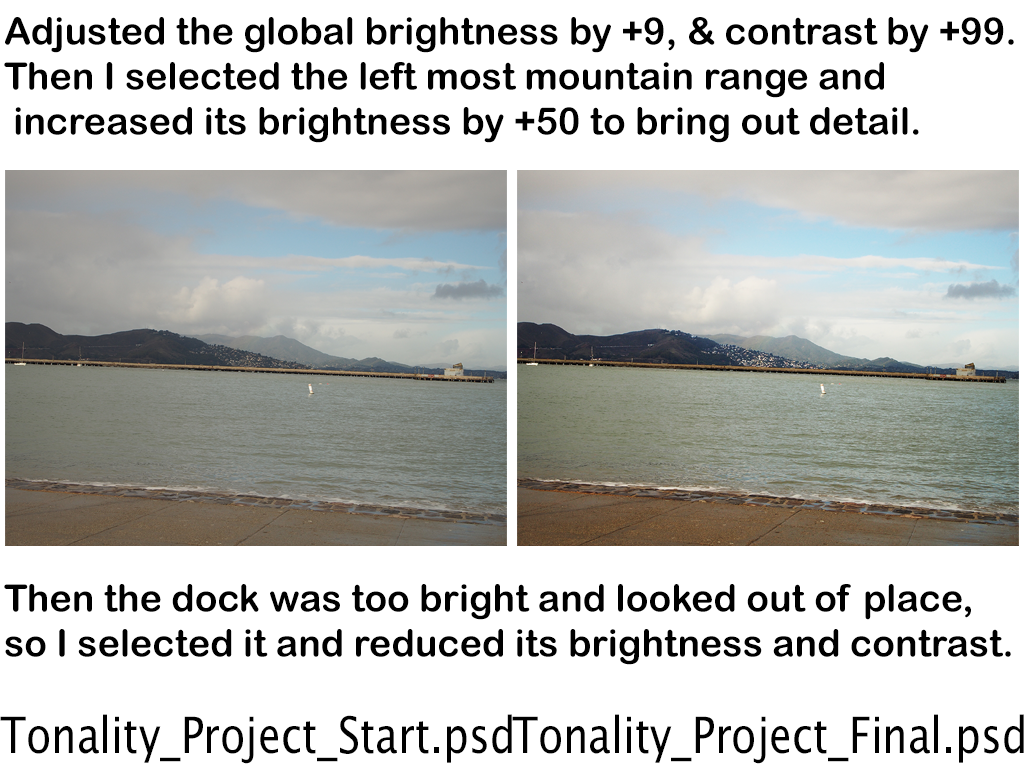
<style>
.page{position:relative;width:1024px;height:768px;background:#ffffff}
.page>*{position:absolute;margin:0}
.t1{font:37.5px "ArialRoundedMTBold";color:#000000}
</style>
<div class="page">
<p class="t1" style="left:4px;top:17px;width:1010px;height:126px">Adjusted the global brightness by +9, &amp; contrast by +99.<br>Then I selected the left most mountain range and <br> increased its brightness by +50 to bring out detail.</p>
<p class="t1" style="left:4px;top:584px;width:1007px;height:81px">Then the dock was too bright and looked out of place, <br>so I selected it and reduced its brightness and contrast.</p>
</div>
